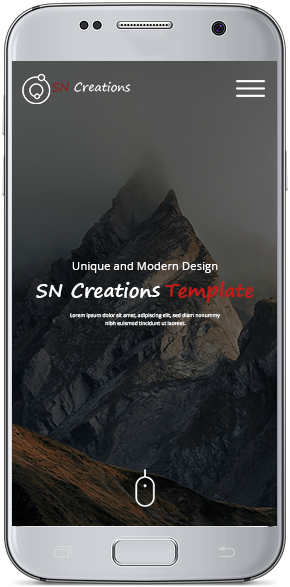
<style>
.page{position:relative;width:290px;height:587px}
.page>*{position:absolute;margin:0}
.t1{font:11.4px "OpenSans";color:#ffffff}
.t2{font:19px "SegoePrint-Bold";color:#ffffff}
.t3{font:19px "SegoePrint-Bold";color:#c11b17}
.t4{font:5.1px/7.6px "OpenSans";color:#ffffff}
</style>
<div class="page">
<p class="t1" style="left:72px;top:262px;width:146px;height:11px">Unique and Modern Design</p>
<p class="t2" style="left:36px;top:281px;width:218px;height:22px">SN Creations <span class="t3">Template</span></p>
<p class="t4" style="left:70px;top:313px;width:150px;height:13px;text-align:center">Lorem ipsum dolor sit amet, adipiscing elit, sed diam nonummy <br>nibh euismod tincidunt ut laoreet.</p>
</div>
